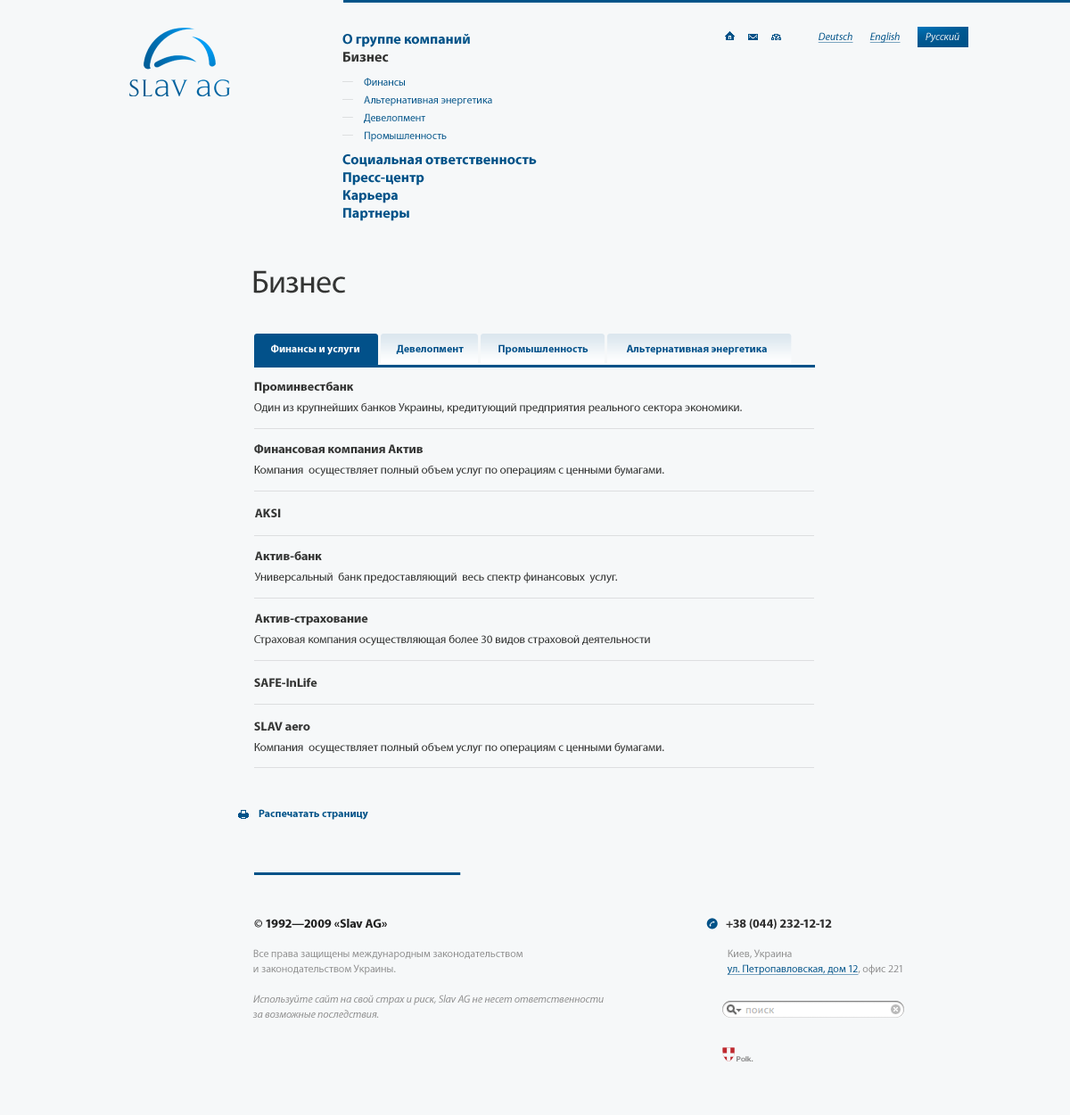
<style>
.page{position:relative;width:1070px;height:1115px;background:#f6f8f9}
.page>*{position:absolute;margin:0}
.t1{font:14.3px "MyriadPro-Bold";color:#005288}
.t2{font:10.7px "MyriadPro-It";color:#005288;text-decoration:underline}
.t3{font:10.7px "MyriadPro-It";color:#eaeef1}
.t4{font:14.3px "MyriadPro-Bold";color:#343534}
.t5{font:10.7px "MyriadPro-Regular";color:#005288}
.t6{font:32.1px "MyriadPro-Regular";color:#343534}
.t7{font:10.7px "MyriadPro-Bold";color:#ffffff}
.t8{font:10.7px "MyriadPro-Bold";color:#02518a}
.t9{font:12.5px "MyriadPro-Bold";color:#343534}
.t10{font:11.6px "MyriadPro-Regular";color:#343534}
.t11{font:10.7px "MyriadPro-Bold";color:#005288}
.t12{font:12.5px "MyriadPro-Bold";color:#212121}
.t13{font:12.5px "MyriadPro-Bold";color:#303030}
.t14{font:10.7px/15.2px "MyriadPro-It";color:#8e8e8e}
.t15{font:10.7px/15.2px "MyriadPro-Regular";color:#8e8e8e}
.t16{font:10.7px/15.2px "MyriadPro-Regular";color:#005288;text-decoration:underline}
.t17{font:7.1px "HelveticaNeue-Bold";color:#8a8a8a}
</style>
<div class="page">
<p class="t1" style="left:342px;top:34px;width:128px;height:13px">О группе компаний</p>
<p class="t2" style="left:818px;top:32px;width:35px;height:11px">Deutsch</p>
<p class="t2" style="left:869px;top:32px;width:32px;height:11px">English</p>
<p class="t3" style="left:925px;top:32px;width:34px;height:11px">Русский</p>
<p class="t4" style="left:343px;top:52px;width:46px;height:10px">Бизнес</p>
<p class="t5" style="left:364px;top:78px;width:41px;height:8px">Финансы</p>
<p class="t5" style="left:364px;top:95px;width:128px;height:11px">Альтернативная энергетика</p>
<p class="t5" style="left:364px;top:113px;width:61px;height:10px">Девелопмент</p>
<p class="t5" style="left:365px;top:131px;width:82px;height:11px">Промышленность</p>
<p class="t1" style="left:342px;top:154px;width:195px;height:13px">Социальная ответственность</p>
<p class="t1" style="left:343px;top:172px;width:81px;height:13px">Пресс-центр</p>
<p class="t1" style="left:343px;top:190px;width:55px;height:13px">Карьера</p>
<p class="t1" style="left:343px;top:208px;width:66px;height:13px">Партнеры</p>
<p class="t6" style="left:253px;top:270px;width:92px;height:23px">Бизнес</p>
<p class="t7" style="left:271px;top:344px;width:88px;height:11px">Финансы и услуги</p>
<p class="t8" style="left:396px;top:344px;width:68px;height:10px">Девелопмент</p>
<p class="t8" style="left:498px;top:344px;width:90px;height:11px">Промышленность</p>
<p class="t8" style="left:626px;top:344px;width:141px;height:11px">Альтернативная энергетика</p>
<p class="t9" style="left:254px;top:382px;width:100px;height:11px">Проминвестбанк</p>
<p class="t10" style="left:254px;top:402px;width:488px;height:12px">Один из крупнейших банков Украины, кредитующий предприятия реального сектора экономики.</p>
<p class="t9" style="left:254px;top:444px;width:169px;height:10px">Финансовая компания Актив</p>
<p class="t10" style="left:254px;top:465px;width:410px;height:11px">Компания  осуществляет полный объем услуг по операциям с ценными бумагами.</p>
<p class="t9" style="left:255px;top:508px;width:26px;height:9px">AKSI</p>
<p class="t9" style="left:255px;top:551px;width:67px;height:9px">Актив-банк</p>
<p class="t10" style="left:254px;top:572px;width:363px;height:11px">Универсальный  банк предоставляющий  весь спектр финансовых  услуг.</p>
<p class="t9" style="left:255px;top:613px;width:113px;height:12px">Актив-страхование</p>
<p class="t10" style="left:254px;top:634px;width:396px;height:12px">Страховая компания осуществляющая более 30 видов страховой деятельности</p>
<p class="t9" style="left:254px;top:678px;width:63px;height:9px">SAFE-InLife</p>
<p class="t9" style="left:254px;top:721px;width:56px;height:9px">SLAV aero</p>
<p class="t10" style="left:254px;top:742px;width:410px;height:11px">Компания  осуществляет полный объем услуг по операциям с ценными бумагами.</p>
<p class="t11" style="left:259px;top:809px;width:109px;height:10px">Распечатать страницу</p>
<p class="t12" style="left:254px;top:918px;width:133px;height:9px">© 1992—2009 «Slav AG»</p>
<p class="t13" style="left:726px;top:918px;width:106px;height:11px">+38 (044) 232-12-12</p>
<p class="t14" style="left:252px;top:949px;width:352px;height:68px"><span class="t15">Все права защищены международным законодательством<br>и законодательством Украины.<br><br></span>Используйте сайт на свой страх и риск, Slav AG не несет ответственности<br>за возможные последствия.</p>
<p class="t16" style="left:727px;top:949px;width:175px;height:26px"><span class="t15">Киев, Украина<br></span>ул. Петропавловская, дом 12<span class="t15">, офис 221</span></p>
<p class="t17" style="left:736px;top:1056px;width:17px;height:5px">Polk.</p>
</div>
